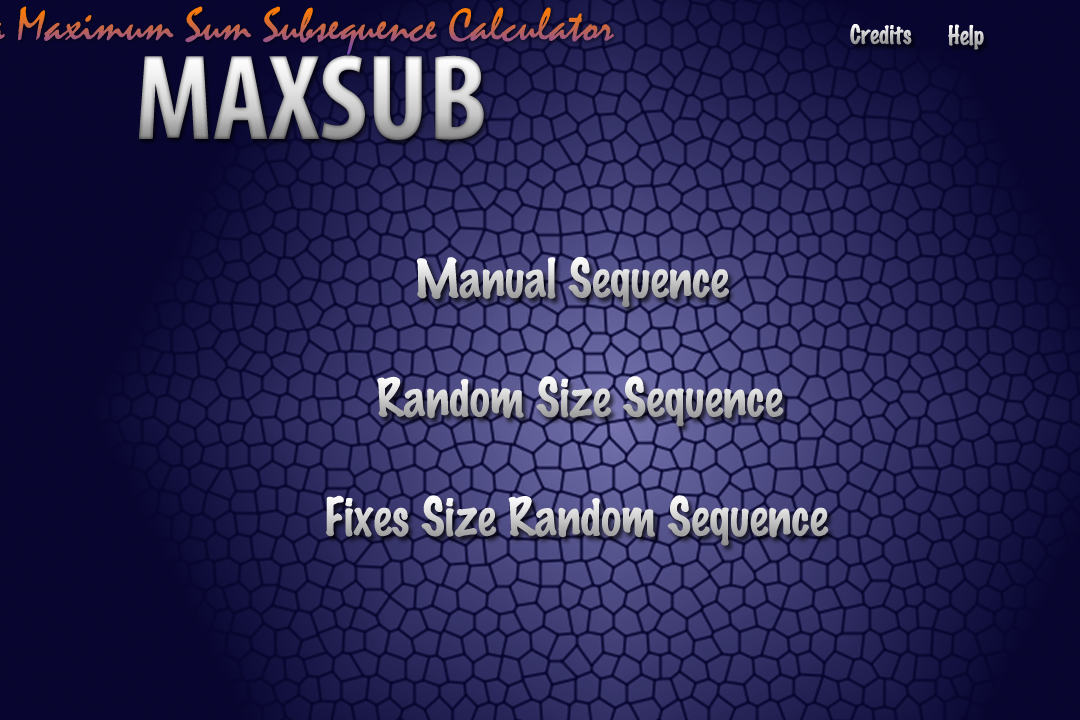
<style>
.page{position:relative;width:1080px;height:720px}
.page>*{position:absolute;margin:0}
.t1{font:24px "MarkerFelt-Thin"}
.t2{font:122.5px "MyriadPro-BoldCond"}
.t3{font:48px "MarkerFelt-Thin"}
</style>
<div class="page">
<p class="t1" style="left:850px;top:24px;width:62px;height:21px">Credits</p>
<p class="t1" style="left:948px;top:24px;width:36px;height:26px">Help</p>
<p class="t2" style="left:138px;top:55px;width:346px;height:85px">MAXSUB</p>
<p class="t3" style="left:416px;top:257px;width:314px;height:50px">Manual Sequence</p>
<p class="t3" style="left:377px;top:376px;width:407px;height:51px">Random Size Sequence</p>
<p class="t3" style="left:326px;top:495px;width:503px;height:51px">Fixes Size Random Sequence</p>
</div>
